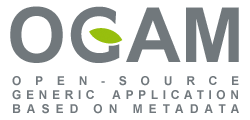
<style>
.page{position:relative;width:250px;height:120px;background:#ffffff}
.page>*{position:absolute;margin:0}
.t1{font:12px "Arial-BoldMT";color:#71787d}
</style>
<div class="page">
<p class="t1" style="left:12px;top:76px;width:227px;height:38px;text-align:justify">OPEN-SOURCE <br>GENERIC APPLICATION <br>BASED ON METADATA</p>
</div>
